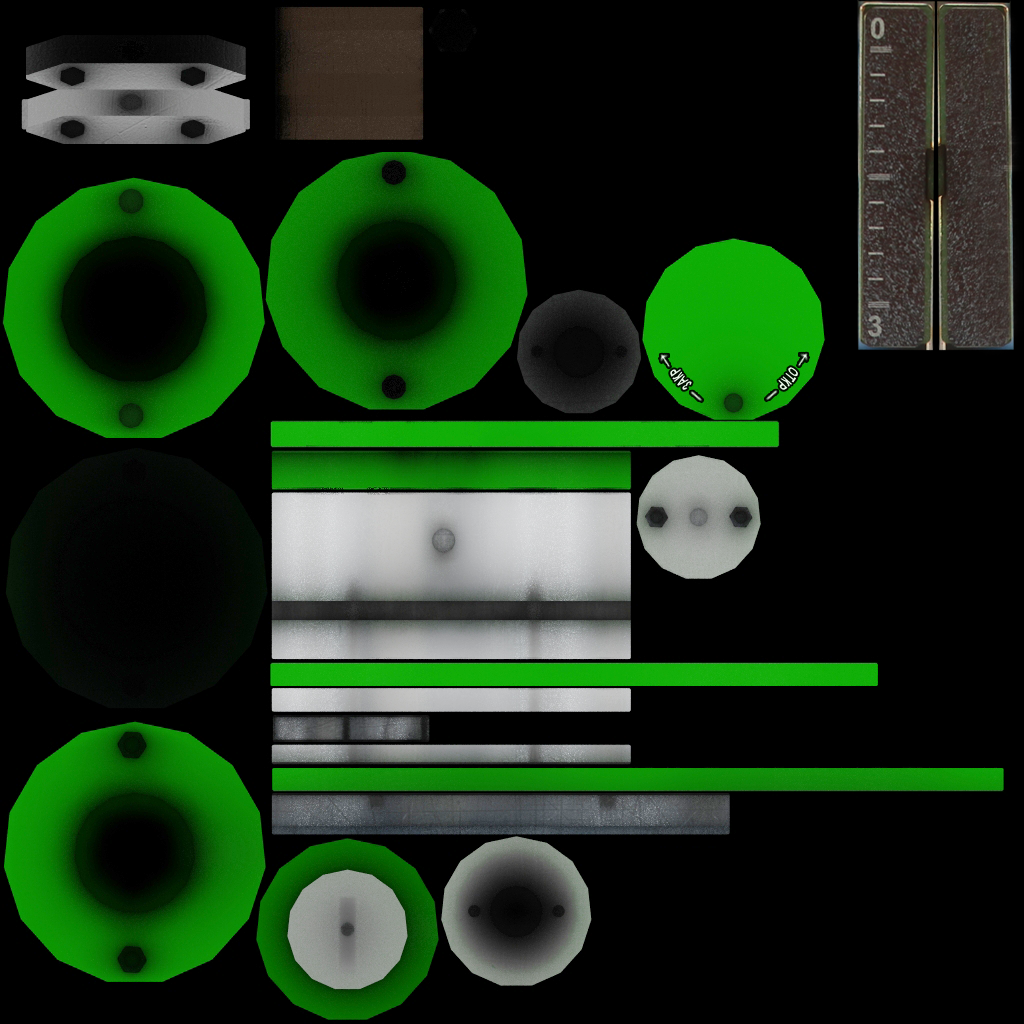
<style>
.page{position:relative;width:1024px;height:1024px;background:#000000}
.page>*{position:absolute;margin:0}
.t1{font:16.1px "Arial-BoldMT";color:#e7f6e6;scale:0.51 1}
</style>
<div class="page">
<p class="t1" style="left:670px;top:369px;width:22px;height:21px;rotate:-129deg">ЗАКР</p>
<p class="t1" style="left:778px;top:367px;width:20px;height:23px;rotate:131deg">ОТКР</p>
</div>
